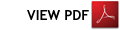
<style>
.page{position:relative;width:120px;height:30px;background:#ffffff}
.page>*{position:absolute;margin:0}
.t1{font:14px "TrebuchetMS-Bold";color:#000000}
</style>
<div class="page">
<p class="t1" style="left:27px;top:10px;width:62px;height:10px">VIEW PDF</p>
</div>
